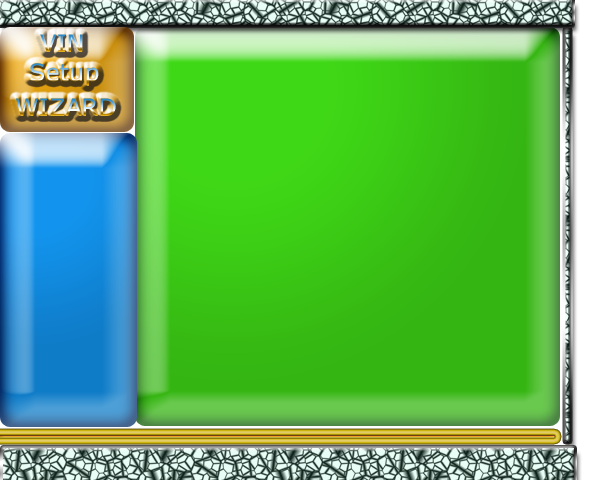
<style>
.page{position:relative;width:600px;height:480px}
.page>*{position:absolute;margin:0}
.t1{font:24px "Verdana"}
</style>
<div class="page">
<p class="t1" style="left:30px;top:63px;width:69px;height:23px">Setup</p>
<p class="t1" style="left:16px;top:98px;width:100px;height:18px">WIZARD</p>
</div>
